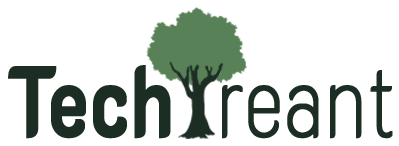
<style>
.page{position:relative;width:399px;height:146px;background:#ffffff}
.page>*{position:absolute;margin:0}
.t1{font:100px "K2D-Thin";color:#1c2d24;font-weight:bold;scale:0.75 1}
.t2{font:100px "K2D-Bold";color:#1c2d24;font-weight:bold;scale:0.75 1}
</style>
<div class="page">
<p class="t1" style="left:8px;top:65px;width:385px;height:74px"><span class="t2">Tech</span>  reant</p>
</div>
